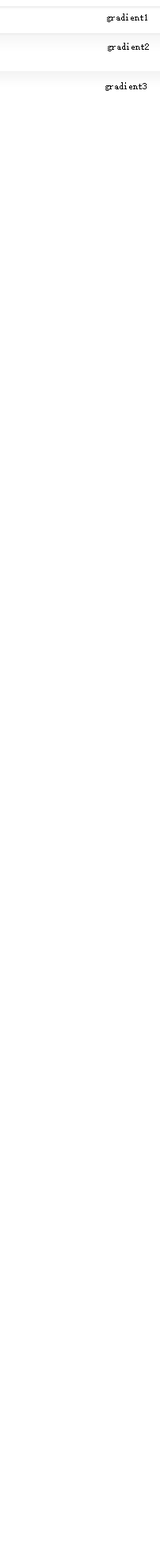
<style>
.page{position:relative;width:160px;height:1568px;background:#ffffff}
.page>*{position:absolute;margin:0}
.t1{font:9.5px "SimSun";color:#000000}
</style>
<div class="page">
<p class="t1" style="left:107px;top:13px;width:40px;height:9px">gradient1</p>
<p class="t1" style="left:105px;top:82px;width:41px;height:9px">gradient3</p>
</div>
